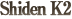
<style>
.page{position:relative;width:72px;height:19px;background:#ffffff}
.page>*{position:absolute;margin:0}
.t1{font:18px "RyuminPro-ExBold";letter-spacing:-0.08em;color:#4a3f32;font-weight:bold;scale:0.9 1}
</style>
<div class="page">
<p class="t1" style="left:0px;top:1px;width:72px;height:15px">Shiden K2</p>
</div>
